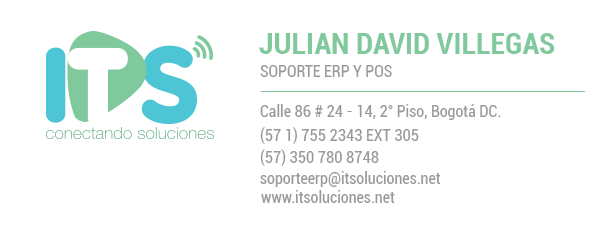
<style>
.page{position:relative;width:608px;height:232px;background:#ffffff}
.page>*{position:absolute;margin:0}
.t1{font:30px "Roboto-BoldCondensed";color:#7fc99d}
.t2{font:16px "Roboto-Condensed";color:#999999}
</style>
<div class="page">
<p class="t1" style="left:259px;top:33px;width:296px;height:21px">JULIAN DAVID VILLEGAS</p>
<p class="t2" style="left:260px;top:65px;width:132px;height:12px">SOPORTE ERP Y POS</p>
<p class="t2" style="left:260px;top:104px;width:241px;height:16px">Calle 86 # 24 - 14, 2° Piso, Bogotá DC.</p>
<p class="t2" style="left:260px;top:127px;width:159px;height:17px">(57 1) 755 2343 EXT 305</p>
<p class="t2" style="left:260px;top:149px;width:119px;height:17px">(57) 350 780 8748</p>
<p class="t2" style="left:260px;top:171px;width:181px;height:16px">soporteerp@itsoluciones.net</p>
<p class="t2" style="left:261px;top:190px;width:134px;height:13px">www.itsoluciones.net</p>
</div>
